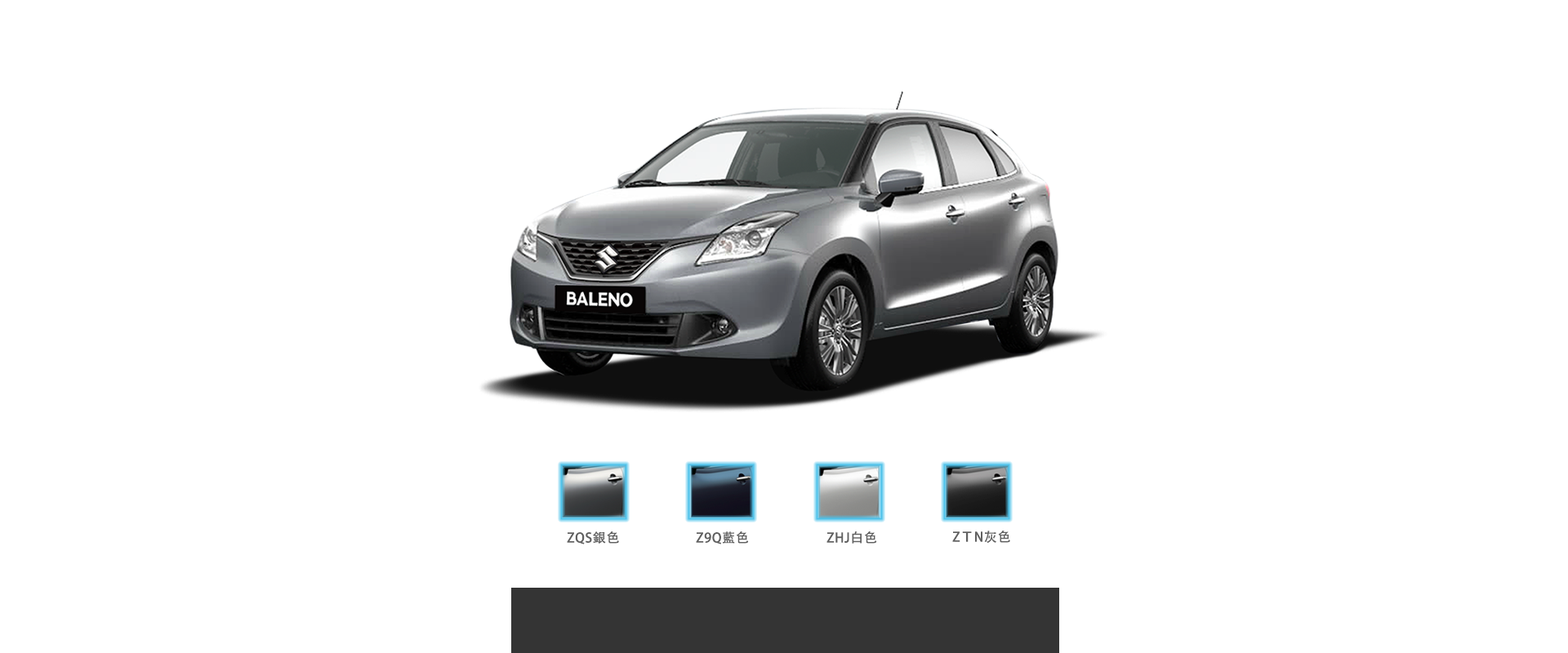
<style>
.page{position:relative;width:1568px;height:653px;background:#ffffff}
.page>*{position:absolute;margin:0}
.t1{font:13.1px "AdobeHeitiStd-Regular";letter-spacing:0.04em;color:#606060}
</style>
<div class="page">
<p class="t1" style="left:567px;top:532px;width:52px;height:13px">ZQS銀色</p>
<p class="t1" style="left:696px;top:532px;width:53px;height:13px">Z9Q藍色</p>
<p class="t1" style="left:826px;top:532px;width:51px;height:12px">ZHJ白色</p>
<p class="t1" style="left:952px;top:531px;width:58px;height:12px">ZＴN灰色</p>
</div>
